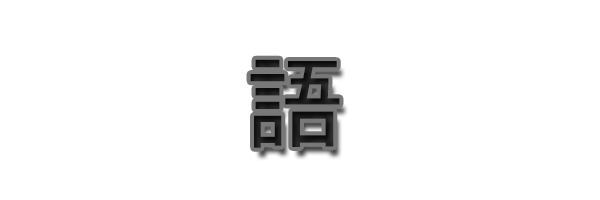
<style>
.page{position:relative;width:600px;height:200px;background:#ffffff}
.page>*{position:absolute;margin:0}
.t1{font:100px "MS-Gothic";color:#181818}
</style>
<div class="page">
<p class="t1" style="left:250px;top:59px;width:90px;height:89px">語</p>
</div>
